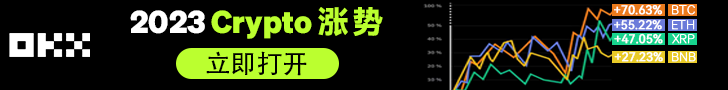
<style>
.page{position:relative;width:728px;height:90px;background:#000000}
.page>*{position:absolute;margin:0}
.t1{font:12px "HarmonyOS_Sans_SC";color:#ffffff;font-weight:bold}
.t2{font:12px "Sohne-Extraleicht";color:#ffffff;font-weight:bold}
.t3{font:31px "Sohne-Fett";color:#bcff2f}
.t4{font:31px "Sohne-Fett";color:#ffffff}
.t5{font:31px "HarmonyOS_Sans_SC_Black";letter-spacing:0.1em;color:#bcff2f}
.t6{font:25.7px "AdobeHeitiStd-Regular";color:#000000}
</style>
<div class="page">
<p class="t1" style="left:614px;top:4px;width:49px;height:11px">+70.63%</p>
<p class="t2" style="left:672px;top:5px;width:23px;height:10px">BTC</p>
<p class="t3" style="left:130px;top:7px;width:253px;height:32px"><span class="t4">2023 </span>Crypto <span class="t5">涨势</span></p>
<p class="t1" style="left:614px;top:19px;width:48px;height:11px">+55.22%</p>
<p class="t2" style="left:672px;top:20px;width:23px;height:10px">ETH</p>
<p class="t1" style="left:614px;top:33px;width:49px;height:11px">+47.05%</p>
<p class="t2" style="left:672px;top:34px;width:23px;height:10px">XRP</p>
<p class="t6" style="left:206px;top:51px;width:101px;height:25px">立即打开</p>
<p class="t1" style="left:614px;top:51px;width:49px;height:11px">+27.23%</p>
<p class="t2" style="left:672px;top:52px;width:24px;height:10px">BNB</p>
</div>
